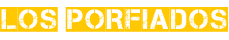
<style>
.page{position:relative;width:229px;height:40px;background:#ffffff}
.page>*{position:absolute;margin:0}
.t1{font:28.1px "Captureit2";color:#ffc800}
</style>
<div class="page">
<p class="t1" style="left:0px;top:7px;width:228px;height:25px">Los Porfiados</p>
</div>
